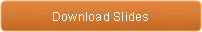
<style>
.page{position:relative;width:202px;height:32px}
.page>*{position:absolute;margin:0}
.t1{font:12px "ArialMT";letter-spacing:0.02em;color:#ffffff}
</style>
<div class="page">
<p class="t1" style="left:53px;top:12px;width:95px;height:9px">Download Slides</p>
</div>
